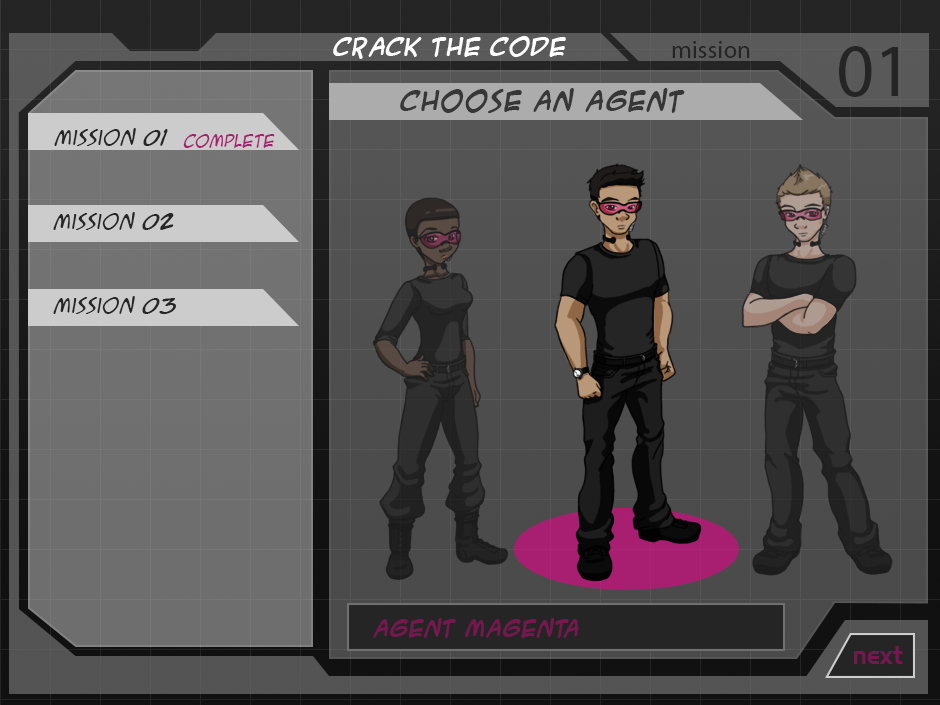
<style>
.page{position:relative;width:940px;height:705px}
.page>*{position:absolute;margin:0}
.t1{font:22px "ACMESecretAgentBold";color:#ffffff}
.t2{font:25px "MyriadPro-Regular";color:#252525}
.t3{font:75px "MyriadPro-Regular";color:#252525}
.t4{font:20px "ACMESecretAgentItalic";color:#252525}
.t5{font:16.7px "ACMESecretAgentItalic";color:#a81f71}
.t6{font:20px "ACMESecretAgentBold";color:#761750}
.t7{font:25px "Slider";color:#761750}
</style>
<div class="page">
<p class="t1" style="left:333px;top:36px;width:233px;height:23px">CRACK THE CODE</p>
<p class="t2" style="left:672px;top:41px;width:78px;height:17px">mission</p>
<p class="t3" style="left:839px;top:46px;width:59px;height:51px">01</p>
<p class="t4" style="left:54px;top:128px;width:114px;height:18px">mission 01</p>
<p class="t5" style="left:183px;top:134px;width:92px;height:14px">COMPLETE</p>
<p class="t4" style="left:53px;top:212px;width:121px;height:18px">mission 02</p>
<p class="t4" style="left:53px;top:296px;width:123px;height:18px">mission 03</p>
<p class="t6" style="left:373px;top:618px;width:206px;height:20px">AGENT MAGENTA</p>
<p class="t7" style="left:854px;top:646px;width:49px;height:18px">next</p>
</div>
